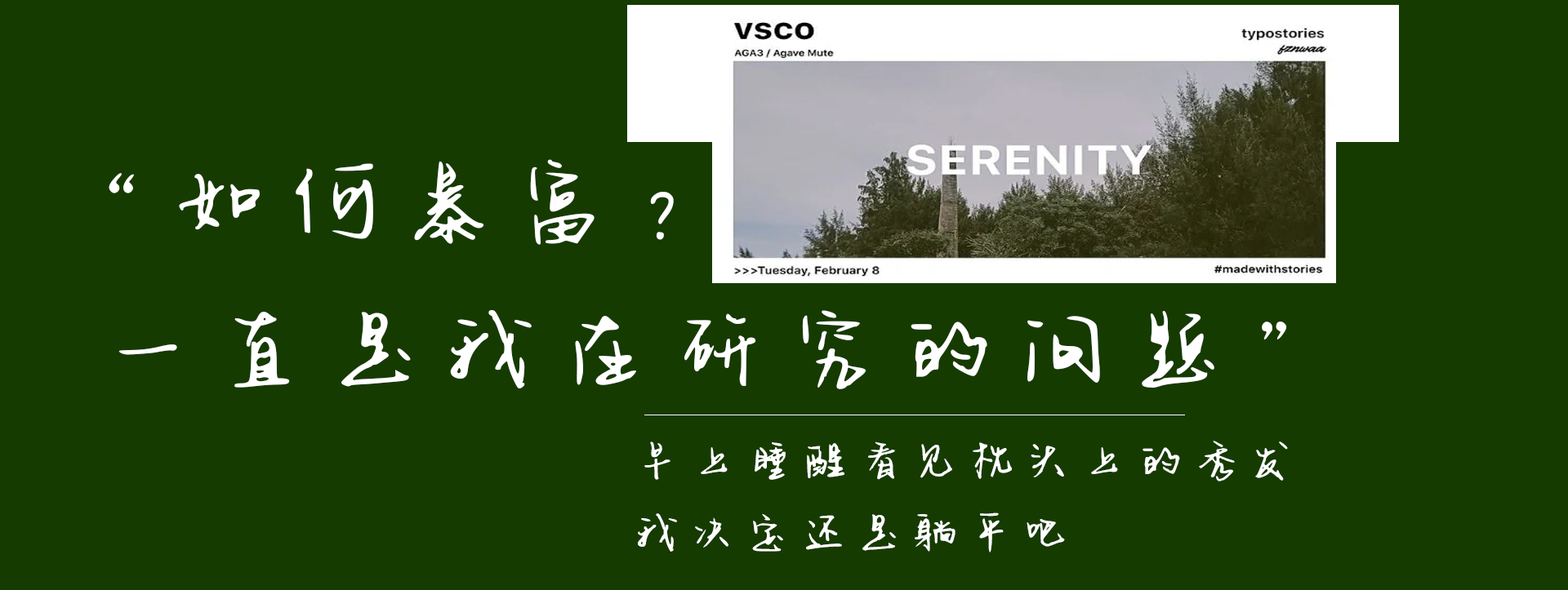
<style>
.page{position:relative;width:1568px;height:590px;background:#163b01}
.page>*{position:absolute;margin:0}
.t1{font:84.1px "CMSXTJ";letter-spacing:0.36em;color:#ffffff}
.t2{font:40.8px "CMSXTJ";letter-spacing:0.36em;color:#ffffff}
</style>
<div class="page">
<p class="t1" style="left:109px;top:159px;width:1178px;height:231px">“如何暴富？<br>一直是我在研究的问题”</p>
<p class="t2" style="left:638px;top:441px;width:650px;height:112px">早上睡醒看见枕头上的秀发<br>我决定还是躺平吧</p>
</div>
